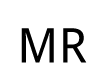
<style>
.page{position:relative;width:105px;height:83px;background:#ffffff}
.page>*{position:absolute;margin:0}
.t1{font:47.9px "DroidSans";color:#000000}
</style>
<div class="page">
<p class="t1" style="left:21px;top:28px;width:66px;height:35px">MR</p>
</div>
